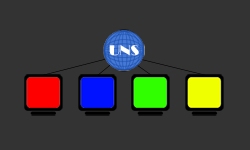
<style>
.page{position:relative;width:250px;height:150px;background:#333333}
.page>*{position:absolute;margin:0}
.t1{font:14.5px "Broadway";color:#ffffff}
</style>
<div class="page">
<p class="t1" style="left:109px;top:45px;width:30px;height:11px">UNS</p>
</div>
